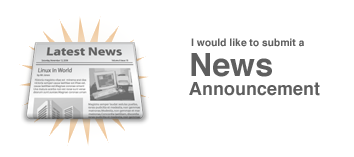
<style>
.page{position:relative;width:354px;height:157px;background:#ffffff}
.page>*{position:absolute;margin:0}
.t1{font:10.3px "Helvetica-Bold";color:#5e5e5e}
.t2{font:18px/19.3px "Helvetica-Bold";color:#5e5e5e}
.t3{font:32px/19.3px "Helvetica-Bold";color:#5e5e5e}
</style>
<div class="page">
<p class="t1" style="left:191px;top:38px;width:113px;height:9px">I would like to submit a</p>
<p class="t2" style="left:189px;top:53px;width:131px;height:43px"><span class="t3">News <br></span>Announcement</p>
</div>
